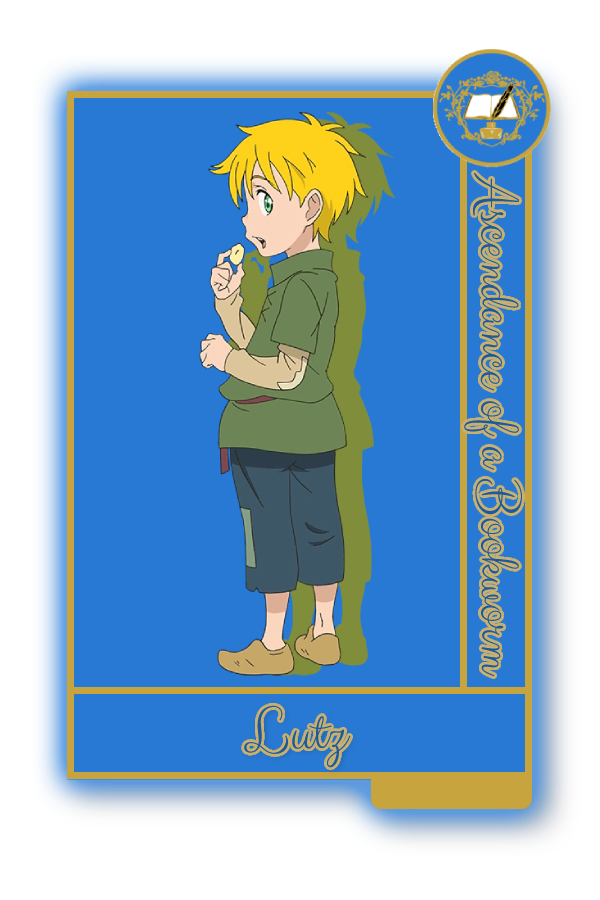
<style>
.page{position:relative;width:600px;height:900px;background:#2879d4}
.page>*{position:absolute;margin:0}
.t1{font:58px "ClickerScript-Regular";color:#1d599c}
.t2{font:60px "ClickerScript-Regular";color:#1d599c}
</style>
<div class="page">
<p class="t1" style="left:464px;top:172px;width:59px;height:505px;rotate:90deg">Ascendance of a Bookworm</p>
<p class="t2" style="left:244px;top:705px;width:107px;height:63px">Lutz</p>
</div>
